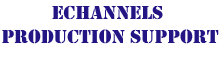
<style>
.page{position:relative;width:220px;height:70px;background:#ffffff}
.page>*{position:absolute;margin:0}
.t1{font:20px "Stencil";color:#231684}
</style>
<div class="page">
<p class="t1" style="left:2px;top:5px;width:217px;height:39px;text-align:center">eChannels <br>Production Support</p>
</div>
